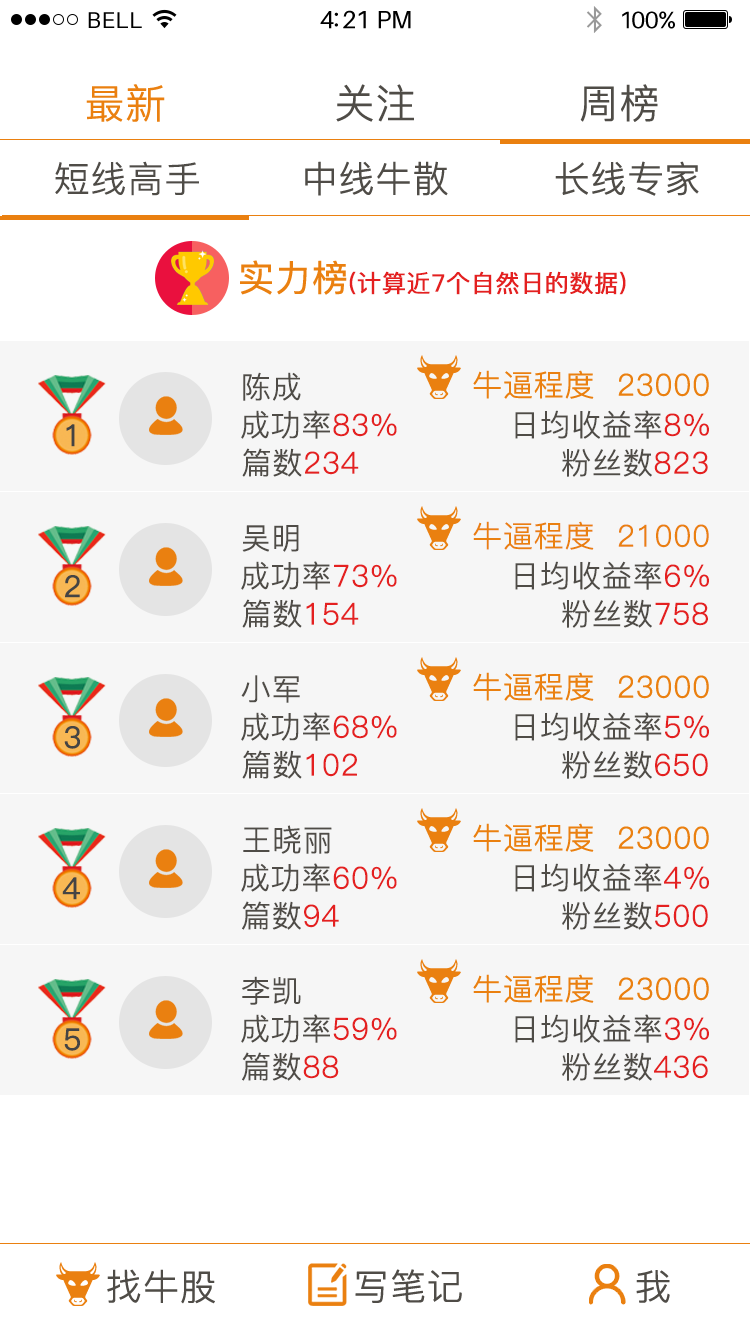
<style>
.page{position:relative;width:750px;height:1339px;background:#f6f6f6}
.page>*{position:absolute;margin:0}
.t1{font:23px "Aileron-Regular";letter-spacing:0.02em;color:#000000}
.t2{font:25px "Aileron-Regular";letter-spacing:-0.02em;color:#000000}
.t3{font:24px "Aileron-Regular";letter-spacing:-0.02em;color:#000000}
.t4{font:40px "PingFang-SC-Regular";color:#ea8010;font-weight:bold}
.t5{font:40px "PingFang-SC-Regular";color:#4f4c47;font-weight:bold}
.t6{font:36px "PingFang-SC-Regular";color:#4f4c47;font-weight:bold}
.t7{font:36px "PingFang-SC-Medium";color:#ea8010;font-weight:bold}
.t8{font:24px "PingFang-SC-Medium";color:#e42020;font-weight:bold}
.t9{font:30px "PingFang-SC-Regular";color:#4f4c47;font-weight:bold}
.t10{font:30px "PingFang-SC-Regular";color:#ea8010;font-weight:bold}
.t11{font:30px "PingFang-SC-Regular";color:#e42020;font-weight:bold}
.t12{font:30px "PingFang-SC-Medium";color:#444444;font-weight:bold}
</style>
<div class="page">
<p class="t1" style="left:88px;top:12px;width:54px;height:16px">BELL</p>
<p class="t2" style="left:320px;top:10px;width:91px;height:19px">4:21 PM</p>
<p class="t3" style="left:622px;top:11px;width:53px;height:18px">100%</p>
<p class="t4" style="left:86px;top:84px;width:79px;height:38px">最新</p>
<p class="t5" style="left:336px;top:84px;width:78px;height:38px">关注</p>
<p class="t5" style="left:580px;top:84px;width:78px;height:38px">周榜</p>
<p class="t6" style="left:55px;top:161px;width:144px;height:35px">短线高手</p>
<p class="t6" style="left:305px;top:161px;width:143px;height:35px">中线牛散</p>
<p class="t6" style="left:555px;top:161px;width:144px;height:35px">长线专家</p>
<p class="t7" style="left:240px;top:260px;width:107px;height:35px">实力榜</p>
<p class="t8" style="left:349px;top:271px;width:277px;height:24px">(计算近7个自然日的数据)</p>
<p class="t9" style="left:243px;top:372px;width:58px;height:29px">陈成</p>
<p class="t10" style="left:473px;top:370px;width:236px;height:29px">牛逼程度  23000</p>
<p class="t9" style="left:241px;top:410px;width:156px;height:29px">成功率<span class="t11">83%</span></p>
<p class="t9" style="left:515px;top:410px;width:194px;height:29px">日均收益率<span class="t11">8%</span></p>
<p class="t12" style="left:66px;top:424px;width:9px;height:23px">1</p>
<p class="t11" style="left:242px;top:448px;width:117px;height:29px"><span class="t9">篇数</span>234</p>
<p class="t9" style="left:562px;top:448px;width:146px;height:29px">粉丝数<span class="t11">823</span></p>
<p class="t10" style="left:473px;top:521px;width:236px;height:29px">牛逼程度  21000</p>
<p class="t9" style="left:242px;top:525px;width:57px;height:27px">吴明</p>
<p class="t9" style="left:241px;top:561px;width:156px;height:29px">成功率<span class="t11">73%</span></p>
<p class="t9" style="left:515px;top:561px;width:194px;height:29px">日均收益率<span class="t11">6%</span></p>
<p class="t12" style="left:65px;top:575px;width:15px;height:23px">2</p>
<p class="t11" style="left:242px;top:599px;width:117px;height:29px"><span class="t9">篇数</span>154</p>
<p class="t9" style="left:562px;top:599px;width:146px;height:29px">粉丝数<span class="t11">758</span></p>
<p class="t9" style="left:241px;top:675px;width:59px;height:28px">小军</p>
<p class="t10" style="left:473px;top:672px;width:236px;height:29px">牛逼程度  23000</p>
<p class="t9" style="left:241px;top:712px;width:156px;height:29px">成功率<span class="t11">68%</span></p>
<p class="t9" style="left:515px;top:712px;width:194px;height:29px">日均收益率<span class="t11">5%</span></p>
<p class="t12" style="left:64px;top:726px;width:16px;height:23px">3</p>
<p class="t11" style="left:242px;top:750px;width:115px;height:29px"><span class="t9">篇数</span>102</p>
<p class="t9" style="left:562px;top:750px;width:146px;height:29px">粉丝数<span class="t11">650</span></p>
<p class="t9" style="left:243px;top:825px;width:89px;height:29px">王晓丽</p>
<p class="t10" style="left:473px;top:823px;width:236px;height:29px">牛逼程度  23000</p>
<p class="t9" style="left:241px;top:863px;width:156px;height:29px">成功率<span class="t11">60%</span></p>
<p class="t9" style="left:515px;top:863px;width:194px;height:29px">日均收益率<span class="t11">4%</span></p>
<p class="t12" style="left:62px;top:877px;width:18px;height:23px">4</p>
<p class="t9" style="left:242px;top:901px;width:97px;height:29px">篇数<span class="t11">94</span></p>
<p class="t9" style="left:562px;top:901px;width:146px;height:29px">粉丝数<span class="t11">500</span></p>
<p class="t9" style="left:242px;top:976px;width:59px;height:29px">李凯</p>
<p class="t10" style="left:473px;top:974px;width:236px;height:29px">牛逼程度  23000</p>
<p class="t9" style="left:241px;top:1014px;width:156px;height:29px">成功率<span class="t11">59%</span></p>
<p class="t9" style="left:515px;top:1014px;width:194px;height:29px">日均收益率<span class="t11">3%</span></p>
<p class="t12" style="left:64px;top:1028px;width:16px;height:23px">5</p>
<p class="t9" style="left:242px;top:1052px;width:97px;height:29px">篇数<span class="t11">88</span></p>
<p class="t9" style="left:562px;top:1052px;width:146px;height:29px">粉丝数<span class="t11">436</span></p>
<p class="t6" style="left:107px;top:1269px;width:108px;height:35px">找牛股</p>
<p class="t6" style="left:355px;top:1269px;width:107px;height:34px">写笔记</p>
<p class="t6" style="left:636px;top:1270px;width:34px;height:33px">我</p>
</div>
